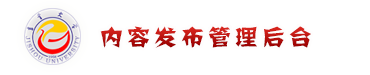
<style>
.page{position:relative;width:370px;height:75px;background:#ffffff}
.page>*{position:absolute;margin:0}
.t1{font:22.5px "FZJZJW--GB1-0";letter-spacing:0.2em}
</style>
<div class="page">
<p class="t1" style="left:100px;top:26px;width:211px;height:22px">内容发布管理后台</p>
</div>
